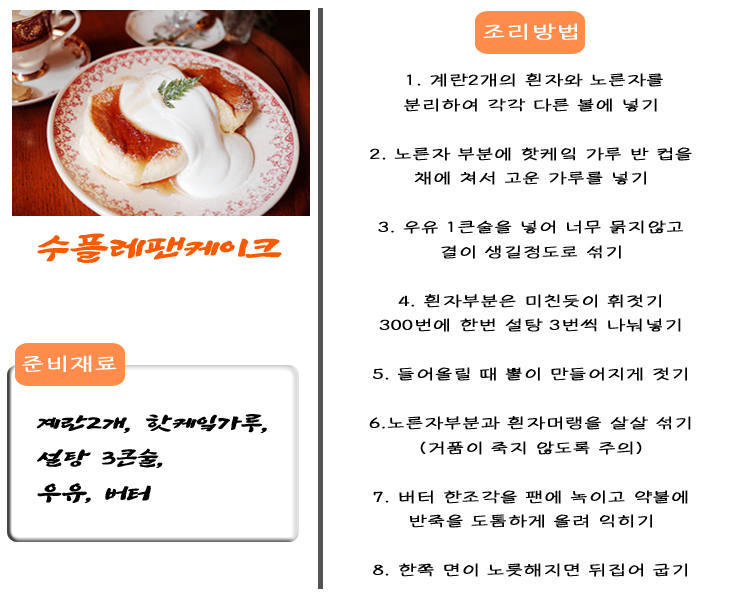
<style>
.page{position:relative;width:750px;height:600px;background:#ffffff}
.page>*{position:absolute;margin:0}
.t1{font:18px "DXMSubtitlesM-KSCpc-EUC-H";color:#ffffff;font-weight:bold;scale:1.45 1}
.t2{font:14px "DXMSubtitlesM-KSCpc-EUC-H";color:#000000;font-weight:bold;scale:1.45 1}
.t3{font:30px "SangSangRock";color:#f75a00;font-weight:bold;font-style:italic;scale:1.45 1}
.t4{font:20px "SangSangRock";color:#000000;font-weight:bold;font-style:italic;scale:1.45 1}
</style>
<div class="page">
<p class="t1" style="left:483px;top:23px;width:94px;height:17px">조리방법</p>
<p class="t2" style="left:369px;top:73px;width:323px;height:504px;text-align:center">1. 계란2개의 흰자와 노른자를<br>분리하여 각각 다른 볼에 넣기<br><br>2. 노른자 부분에 핫케잌 가루 반 컵을<br>채에 쳐서 고운 가루를 넣기<br><br>3. 우유 1큰술을 넣어 너무 묽지않고<br>결이 생길정도로 섞기<br><br>4. 흰자부분은 미친듯이 휘젓기<br>300번에 한번 설탕 3번씩 나눠넣기<br><br>5. 들어올릴 때 뿔이 만들어지게 젓기<br><br>6.노른자부분과 흰자머랭을 살살 섞기<br>(거품이 죽지 않도록 주의)<br><br>7. 버터 한조각을 팬에 녹이고 약불에<br>반죽을 도톰하게 올려 익히기<br><br>8. 한쪽 면이 노릇해지면 뒤집어 굽기</p>
<p class="t3" style="left:37px;top:233px;width:245px;height:30px">수플레팬케이크</p>
<p class="t1" style="left:22px;top:355px;width:95px;height:17px">준비재료</p>
<p class="t4" style="left:36px;top:414px;width:231px;height:89px">계란2개, 핫케잌가루,<br>설탕 3큰술,<br>우유, 버터</p>
</div>
